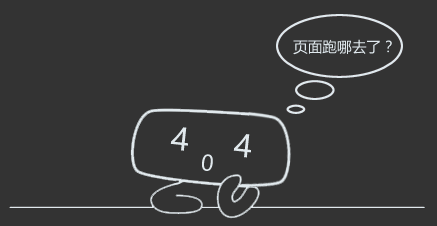
<style>
.page{position:relative;width:437px;height:226px;background:#333333}
.page>*{position:absolute;margin:0}
.t1{font:14.7px "MicrosoftYaHei";color:#e0e9ee}
.t2{font:30.7px "MicrosoftYaHei";color:#e1e9ed}
.t3{font:21.3px "MicrosoftYaHei";color:#e1e9ed}
</style>
<div class="page">
<p class="t1" style="left:293px;top:39px;width:99px;height:16px">页面跑哪去了？</p>
<p class="t2" style="left:170px;top:127px;width:81px;height:31px;rotate:6deg">4     4</p>
<p class="t3" style="left:202px;top:154px;width:11px;height:17px;rotate:6deg">0</p>
</div>
